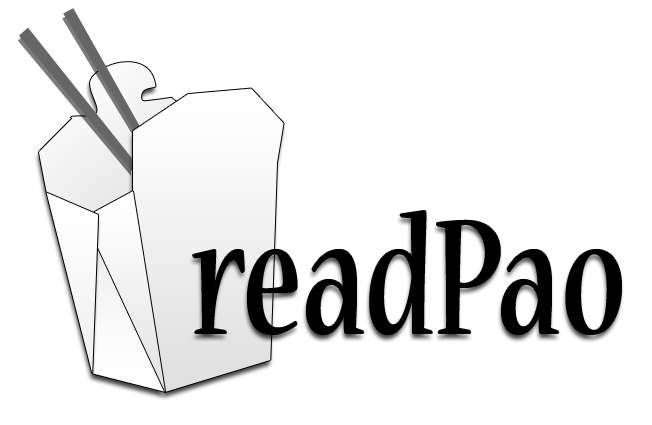
<style>
.page{position:relative;width:652px;height:425px;background:#ffffff}
.page>*{position:absolute;margin:0}
.t1{font:180px "NuevaStd-Cond";color:#000000}
</style>
<div class="page">
<p class="t1" style="left:193px;top:211px;width:428px;height:124px">readPao</p>
</div>
